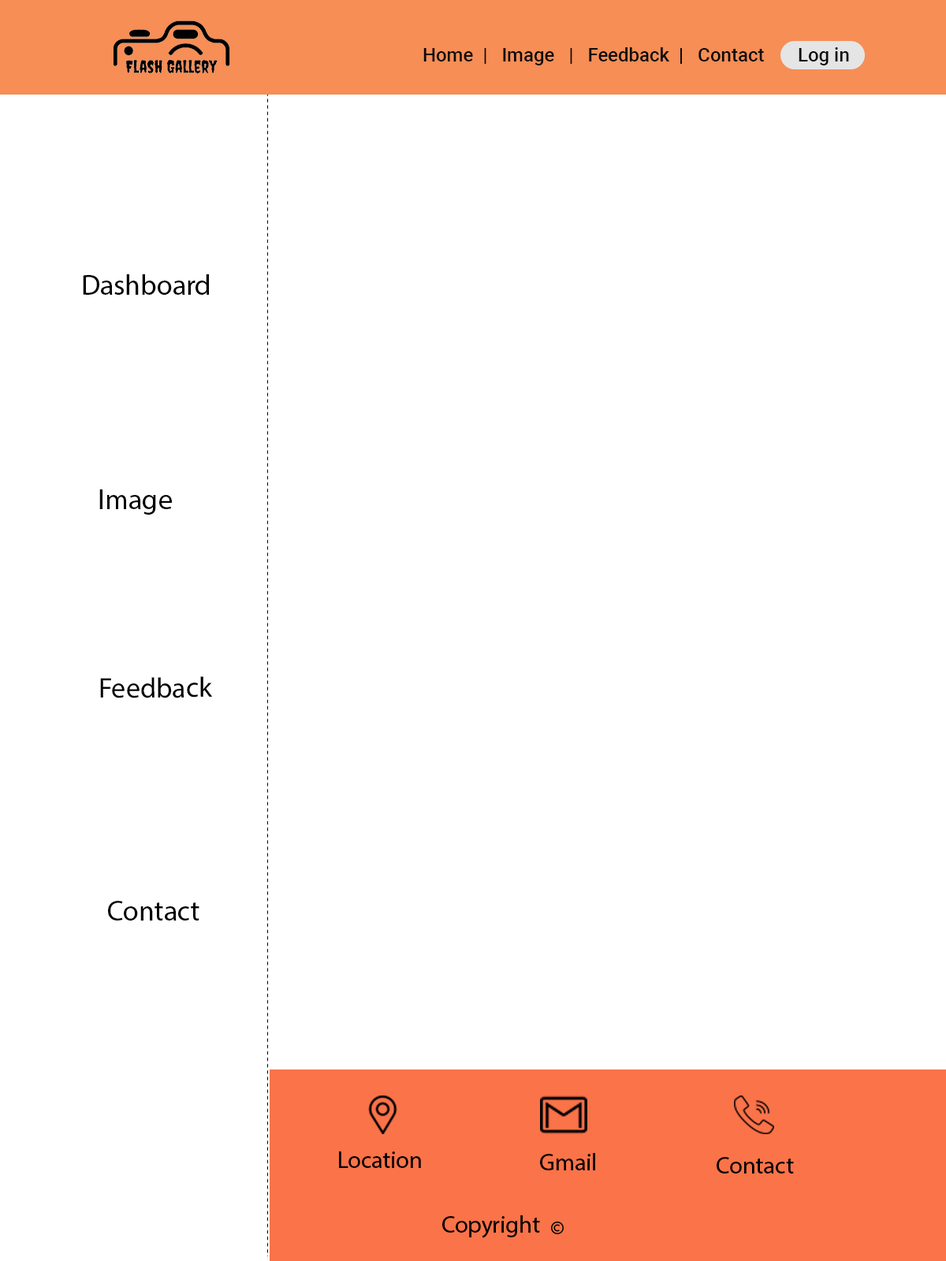
<style>
.page{position:relative;width:946px;height:1261px;background:#ffffff}
.page>*{position:absolute;margin:0}
.t1{font:18.9px "Roboto-Medium";color:#0c0b0b}
.t2{font:28.4px "MyriadHebrew-Regular";color:#000000}
.t3{font:23.6px "MyriadHebrew-Regular";color:#000000}
.t4{font:23.8px "MyriadHebrew-Regular";color:#000000}
</style>
<div class="page">
<p class="t1" style="left:423px;top:47px;width:341px;height:18px">Home  |   Image   |   Feedback  |   Contact</p>
<p class="t1" style="left:798px;top:47px;width:51px;height:18px">Log in</p>
<p class="t2" style="left:83px;top:274px;width:126px;height:21px">Dashboard</p>
<p class="t2" style="left:99px;top:489px;width:73px;height:26px">Image</p>
<p class="t2" style="left:100px;top:676px;width:113px;height:22px">Feedback</p>
<p class="t2" style="left:108px;top:901px;width:91px;height:19px">Contact</p>
<p class="t3" style="left:339px;top:1151px;width:82px;height:17px">Location</p>
<p class="t3" style="left:540px;top:1153px;width:55px;height:17px">Gmail</p>
<p class="t3" style="left:716px;top:1157px;width:78px;height:16px">Contact</p>
<p class="t4" style="left:442px;top:1215px;width:98px;height:23px">Copyright</p>
</div>
